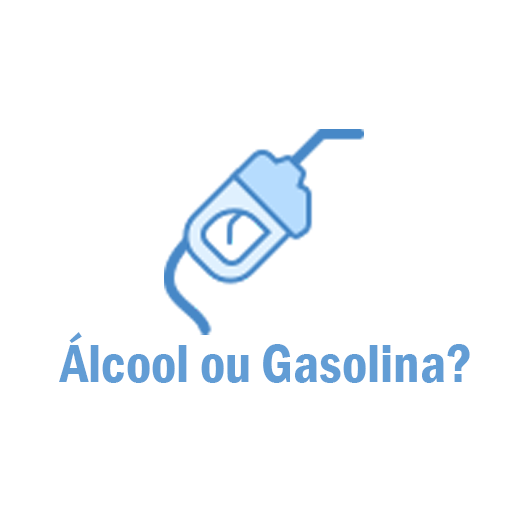
<style>
.page{position:relative;width:512px;height:512px;background:#ffffff}
.page>*{position:absolute;margin:0}
.t1{font:55px "FranklinGothic-DemiCond";color:#629dd5}
</style>
<div class="page">
<p class="t1" style="left:59px;top:332px;width:411px;height:51px">Álcool ou Gasolina?</p>
</div>
